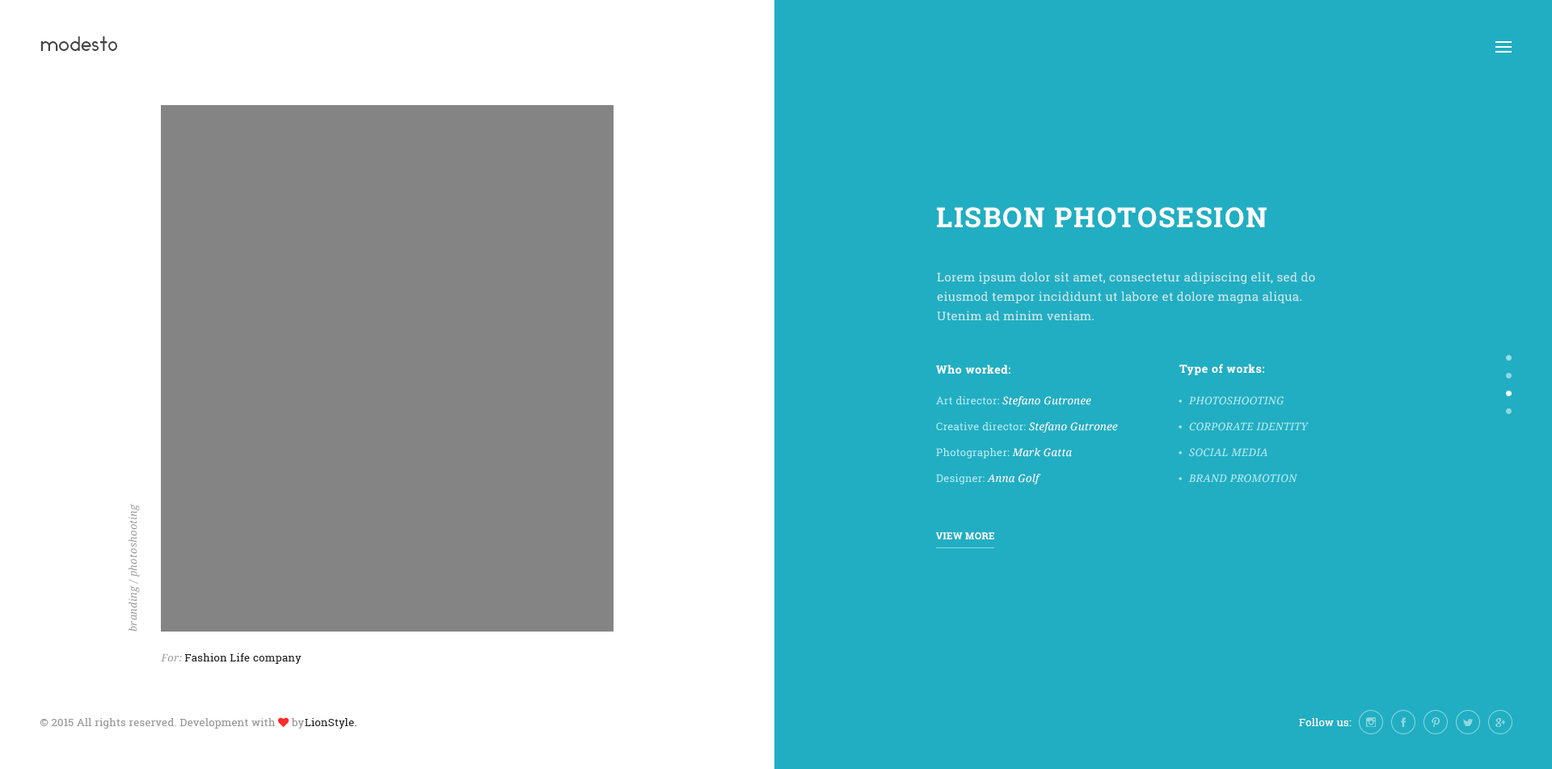
<style>
.page{position:relative;width:1552px;height:769px;background:#21aec2}
.page>*{position:absolute;margin:0}
.t1{font:19.4px "Ikaros";letter-spacing:0.025em;color:#444444}
.t2{font:27.5px "RobotoSlab-Bold";letter-spacing:0.05em;color:#ffffff;text-transform:uppercase}
.t3{font:12.1px/19.4px "RobotoSlab-Regular";letter-spacing:0.025em;color:#cee9ee}
.t4{font:11.3px "RobotoSlab-Bold";letter-spacing:0.05em;color:#ffffff}
.t5{font:10.5px/25.9px "RobotoSlab-Regular";letter-spacing:0.025em;color:#b1ecf5}
.t6{font:10.5px/25.9px "DroidSerif-Italic";letter-spacing:0.025em;color:#ffffff}
.t7{font:14.5px/25.9px "Raleway";color:#b1ecf5}
.t8{font:10.5px/25.9px "DroidSerif-Italic";letter-spacing:0.025em;color:#b1ecf5;text-transform:uppercase}
.t9{font:10.7px "DroidSerif-Italic";letter-spacing:0.025em;color:#989898;scale:0.97 1}
.t10{font:9.7px "RobotoSlab-Bold";letter-spacing:0.025em;color:#ffffff;text-transform:uppercase}
.t11{font:10.5px "DroidSerif-Italic";letter-spacing:0.025em;color:#989898}
.t12{font:10.6px "RobotoSlab-Regular";letter-spacing:0.025em;color:#222222}
.t13{font:10.5px "RobotoSlab-Regular";letter-spacing:0.025em;color:#989898}
.t14{font:10.5px "FontAwesome";letter-spacing:0.025em;color:#fe2b2b}
.t15{font:10.5px "RobotoSlab-Regular";letter-spacing:0.025em;color:#222222}
.t16{font:10.5px "RobotoSlab-Regular";letter-spacing:0.025em;color:#ffffff}
</style>
<div class="page">
<p class="t1" style="left:40px;top:36px;width:77px;height:15px">modesto</p>
<p class="t2" style="left:937px;top:207px;width:329px;height:21px">Lisbon photosesion</p>
<p class="t3" style="left:937px;top:272px;width:378px;height:49px">Lorem ipsum dolor sit amet, consectetur adipiscing elit, sed do eiusmod tempor incididunt ut labore et dolore magna aliqua. Utenim ad minim veniam.</p>
<p class="t4" style="left:936px;top:364px;width:74px;height:10px">Who worked:</p>
<p class="t4" style="left:1179px;top:364px;width:85px;height:11px">Type of works:</p>
<p class="t5" style="left:936px;top:396px;width:182px;height:88px">Art director: <span class="t6">Stefano Gutronee<br></span>Creative director: <span class="t6">Stefano Gutronee<br></span>Photographer: <span class="t6">Mark Gatta<br></span>Designer: <span class="t6">Anna Golf</span></p>
<p class="t7" style="left:1178px;top:399px;width:3px;height:81px">•<br>•<br>•<br>•</p>
<p class="t8" style="left:1188px;top:396px;width:120px;height:86px">Photoshooting<br>Corporate identity<br>Social Media<br>Brand Promotion</p>
<p class="t9" style="left:128px;top:503px;width:12px;height:128px;rotate:-90deg">branding / photoshooting</p>
<p class="t10" style="left:936px;top:532px;width:58px;height:7px">view more</p>
<p class="t11" style="left:161px;top:653px;width:21px;height:8px">For:</p>
<p class="t12" style="left:184px;top:653px;width:117px;height:10px">Fashion Life company</p>
<p class="t13" style="left:40px;top:717px;width:264px;height:11px">© 2015 All rights reserved. Development with <span class="t14">♥ </span>by</p>
<p class="t15" style="left:305px;top:718px;width:51px;height:10px">LionStyle.</p>
<p class="t16" style="left:1299px;top:718px;width:52px;height:8px">Follow us:</p>
</div>
